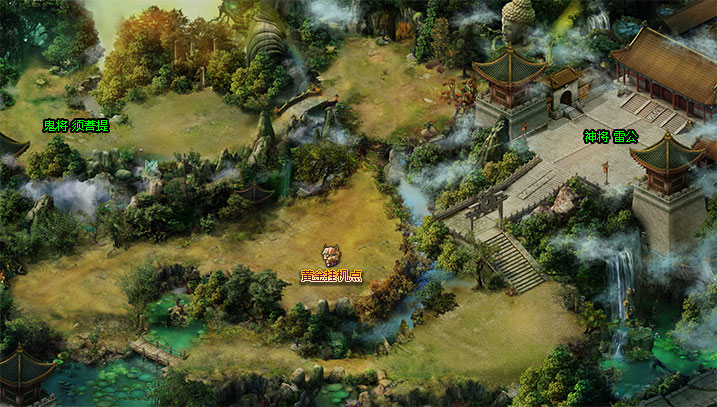
<style>
.page{position:relative;width:717px;height:407px}
.page>*{position:absolute;margin:0}
.t1{font:12px "MicrosoftYaHei";color:#00ff00}
.t2{font:12px "MicrosoftYaHei";color:#701633}
</style>
<div class="page">
<p class="t1" style="left:44px;top:120px;width:64px;height:11px">鬼将 须菩提</p>
<p class="t1" style="left:585px;top:131px;width:52px;height:11px">神将 雷公</p>
<p class="t2" style="left:302px;top:270px;width:59px;height:11px">黄金挂机点</p>
</div>
